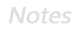
<style>
.page{position:relative;width:79px;height:30px;background:#ffffff}
.page>*{position:absolute;margin:0}
.t1{font:23.1px "Leelawadee";color:#c4bdbd;font-weight:bold;font-style:italic}
</style>
<div class="page">
<p class="t1" style="left:9px;top:7px;width:63px;height:17px;opacity:0.5">Notes</p>
</div>
